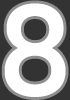
<style>
.page{position:relative;width:70px;height:100px;background:#ffffff}
.page>*{position:absolute;margin:0}
.t1{font:128.8px "Bahnschrift";color:#ffffff;scale:1.09 1}
</style>
<div class="page">
<p class="t1" style="left:4px;top:3px;width:62px;height:94px">8</p>
</div>
